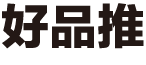
<style>
.page{position:relative;width:146px;height:65px;background:#ffffff}
.page>*{position:absolute;margin:0}
.t1{font:48px "FZLTTHK--GBK1-0";color:#231815}
</style>
<div class="page">
<p class="t1" style="left:2px;top:3px;width:142px;height:46px">好品推</p>
</div>
